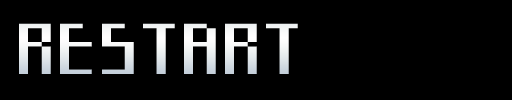
<style>
.page{position:relative;width:512px;height:100px;background:#000000}
.page>*{position:absolute;margin:0}
.t1{font:66.6px "Starcadia";color:#fffefe}
</style>
<div class="page">
<p class="t1" style="left:19px;top:23px;width:279px;height:51px">RESTART</p>
</div>
